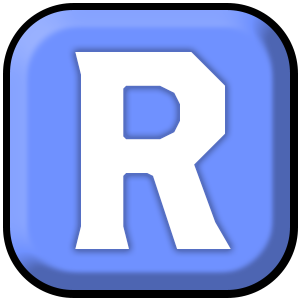
<style>
.page{position:relative;width:300px;height:300px;background:#ffffff}
.page>*{position:absolute;margin:0}
.t1{font:281.3px "BrothersOT-Regular";letter-spacing:0.01em;color:#ffffff}
</style>
<div class="page">
<p class="t1" style="left:75px;top:52px;width:156px;height:197px">R</p>
</div>
